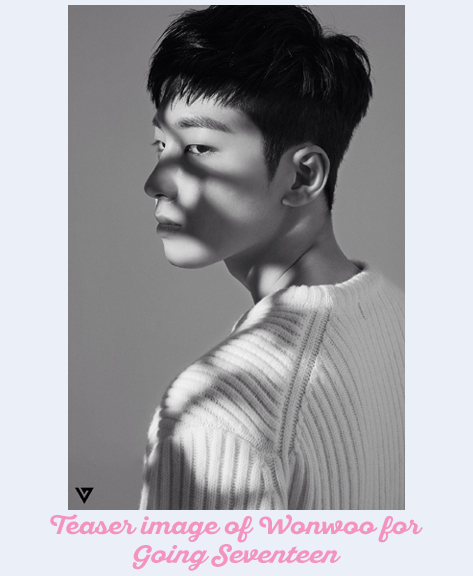
<style>
.page{position:relative;width:473px;height:576px;background:#ebeff8}
.page>*{position:absolute;margin:0}
.t1{font:24px "SantEliaScript-BoldDMO";color:#f394c0;scale:1.1 1}
.t2{font:24px "SantEliaScript-BoldDMO";color:#f394c0;font-style:italic;scale:1.1 1}
</style>
<div class="page">
<p class="t1" style="left:50px;top:514px;width:373px;height:57px;text-align:center">Teaser image of Wonwoo for<br><span class="t2">Going Seventeen</span></p>
</div>
